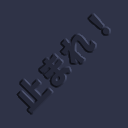
<style>
.page{position:relative;width:128px;height:128px;background:#2f3347}
.page>*{position:absolute;margin:0}
.t1{font:32px "NotoSansJP-Black";color:#252838}
</style>
<div class="page">
<p class="t1" style="left:18px;top:14px;width:92px;height:100px;rotate:-45deg">止まれ！</p>
</div>
